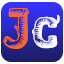
<style>
.page{position:relative;width:64px;height:64px}
.page>*{position:absolute;margin:0}
.t1{font:58.3px "WoodenLogRegular";color:#f76736}
.t2{font:58.3px "WoodenLogRegular";color:#ffffff}
</style>
<div class="page">
<p class="t1" style="left:3px;top:8px;width:57px;height:41px">J<span class="t2">c</span></p>
</div>
